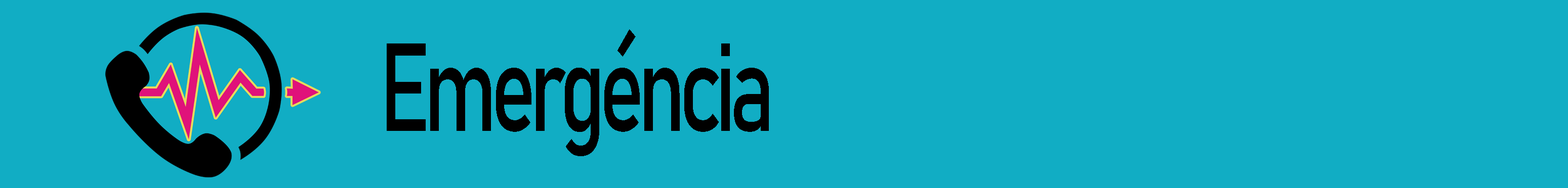
<style>
.page{position:relative;width:1568px;height:188px;background:#11adc4}
.page>*{position:absolute;margin:0}
.t1{font:122.7px "Bahnschrift";letter-spacing:-0.08em;color:#000000;scale:0.7 1}
</style>
<div class="page">
<p class="t1" style="left:387px;top:29px;width:382px;height:127px">Emergéncia</p>
</div>
